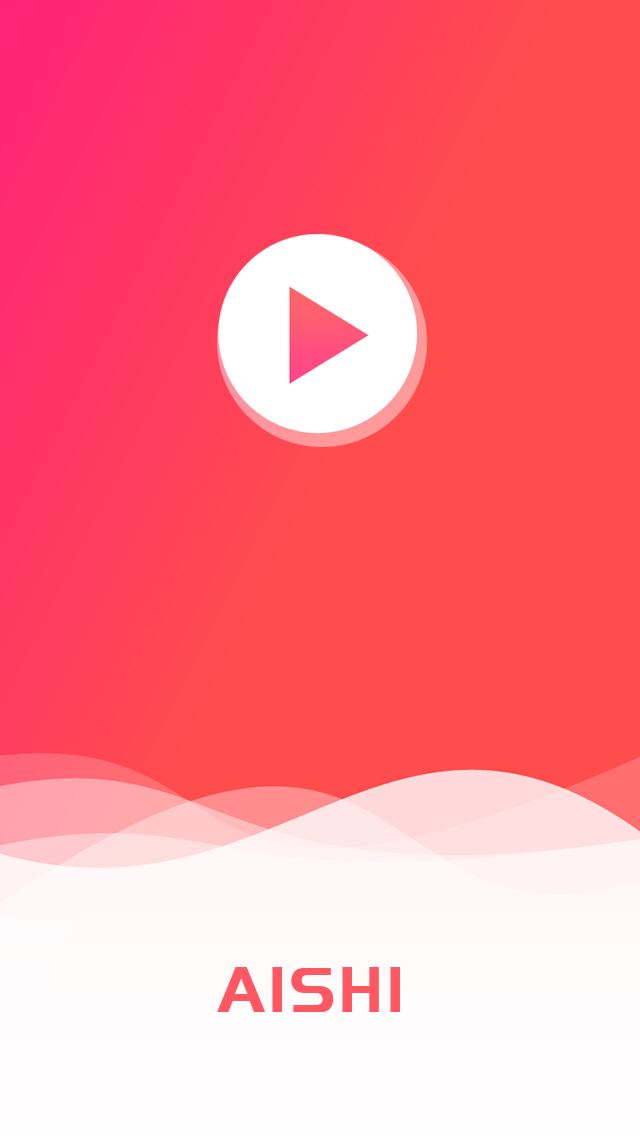
<style>
.page{position:relative;width:640px;height:1136px;background:#ff4d4d}
.page>*{position:absolute;margin:0}
.t1{font:66.7px "PangMenZhengDao";letter-spacing:0.04em;color:#ff5862}
</style>
<div class="page">
<p class="t1" style="left:217px;top:967px;width:183px;height:45px">AISHI</p>
</div>
